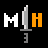
<style>
.page{position:relative;width:48px;height:48px;background:#000000}
.page>*{position:absolute;margin:0}
.t1{font:16px "NokiaCellphoneFC-Small";color:#ffffff;text-transform:uppercase}
.t2{font:16px "NokiaCellphoneFC-Small";color:#ff9900;text-transform:uppercase}
</style>
<div class="page">
<p class="t1" style="left:4px;top:13px;width:38px;height:14px">M  <span class="t2">H</span></p>
</div>
